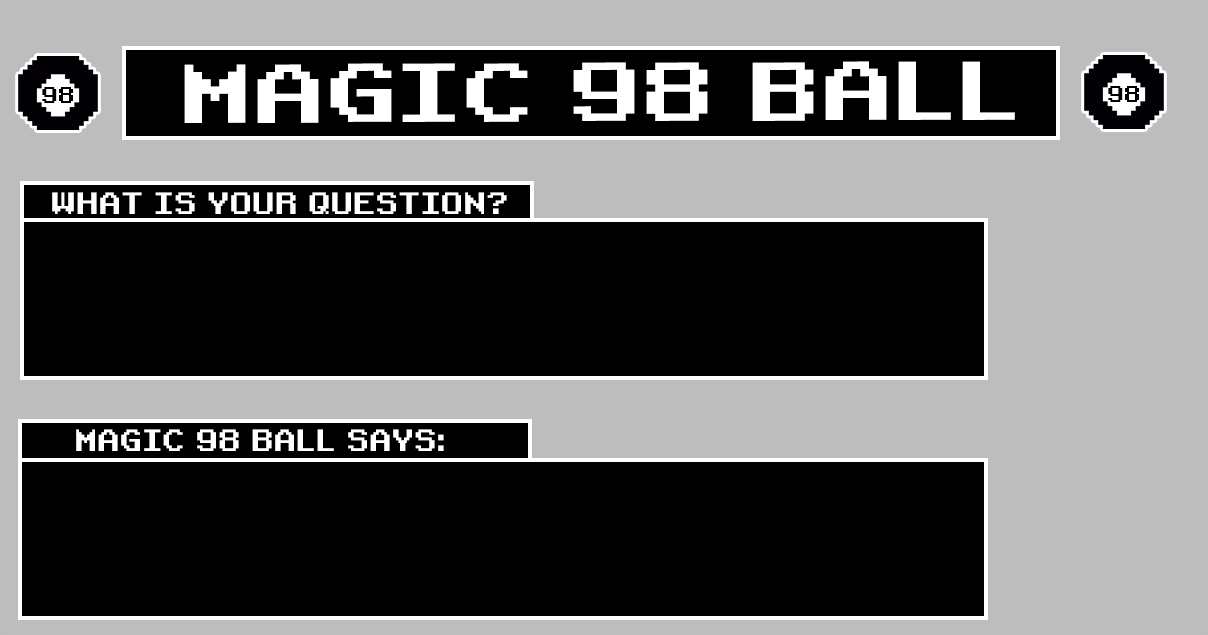
<style>
.page{position:relative;width:1208px;height:635px;background:#000000}
.page>*{position:absolute;margin:0}
.t1{font:80.1px "RetroGaming";letter-spacing:-0.01em;color:#ffffff;scale:1.19 1}
.t2{font:22.1px "RetroGaming";letter-spacing:-0.01em;color:#000000}
.t3{font:29.6px "RetroGaming";letter-spacing:-0.01em;color:#ffffff}
</style>
<div class="page">
<p class="t1" style="left:184px;top:61px;width:831px;height:62px">MAGIC 98 BALL</p>
<p class="t2" style="left:42px;top:87px;width:31px;height:16px">98</p>
<p class="t2" style="left:1108px;top:86px;width:31px;height:16px">98</p>
<p class="t3" style="left:52px;top:192px;width:455px;height:22px">WHAT IS YOUR QUESTION?</p>
<p class="t3" style="left:76px;top:429px;width:368px;height:22px">MAGIC 98 BALL SAYS:</p>
</div>
